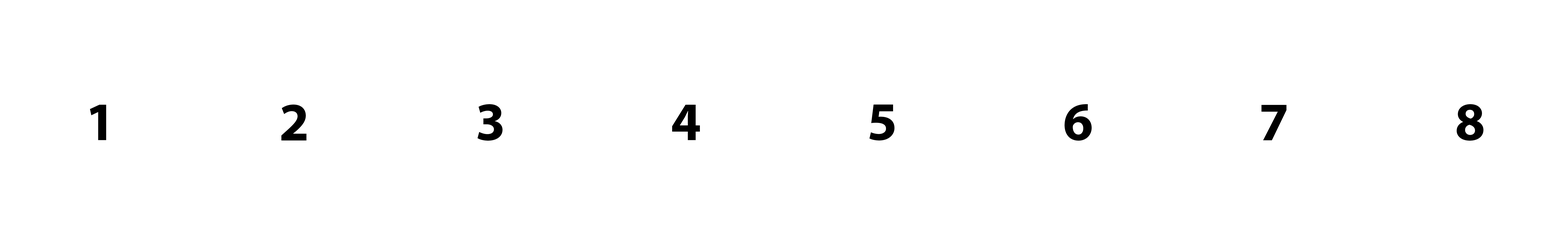
<style>
.page{position:relative;width:1568px;height:245px;background:#ffffff}
.page>*{position:absolute;margin:0}
.t1{font:54.4px "MyriadPro-Bold";color:#000000}
</style>
<div class="page">
<p class="t1" style="left:90px;top:105px;width:16px;height:35px">1</p>
<p class="t1" style="left:281px;top:105px;width:26px;height:35px">2</p>
<p class="t1" style="left:477px;top:104px;width:26px;height:37px">3</p>
<p class="t1" style="left:672px;top:105px;width:28px;height:35px">4</p>
<p class="t1" style="left:869px;top:105px;width:26px;height:36px">5</p>
<p class="t1" style="left:1065px;top:104px;width:27px;height:37px">6</p>
<p class="t1" style="left:1261px;top:105px;width:26px;height:35px">7</p>
<p class="t1" style="left:1457px;top:104px;width:26px;height:37px">8</p>
</div>
